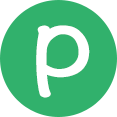
<style>
.page{position:relative;width:117px;height:117px;background:#31b16c}
.page>*{position:absolute;margin:0}
.t1{font:104.2px "HannotateTC-W7";letter-spacing:0.025em;color:#ffffff}
</style>
<div class="page">
<p class="t1" style="left:36px;top:25px;width:54px;height:73px">P</p>
</div>
